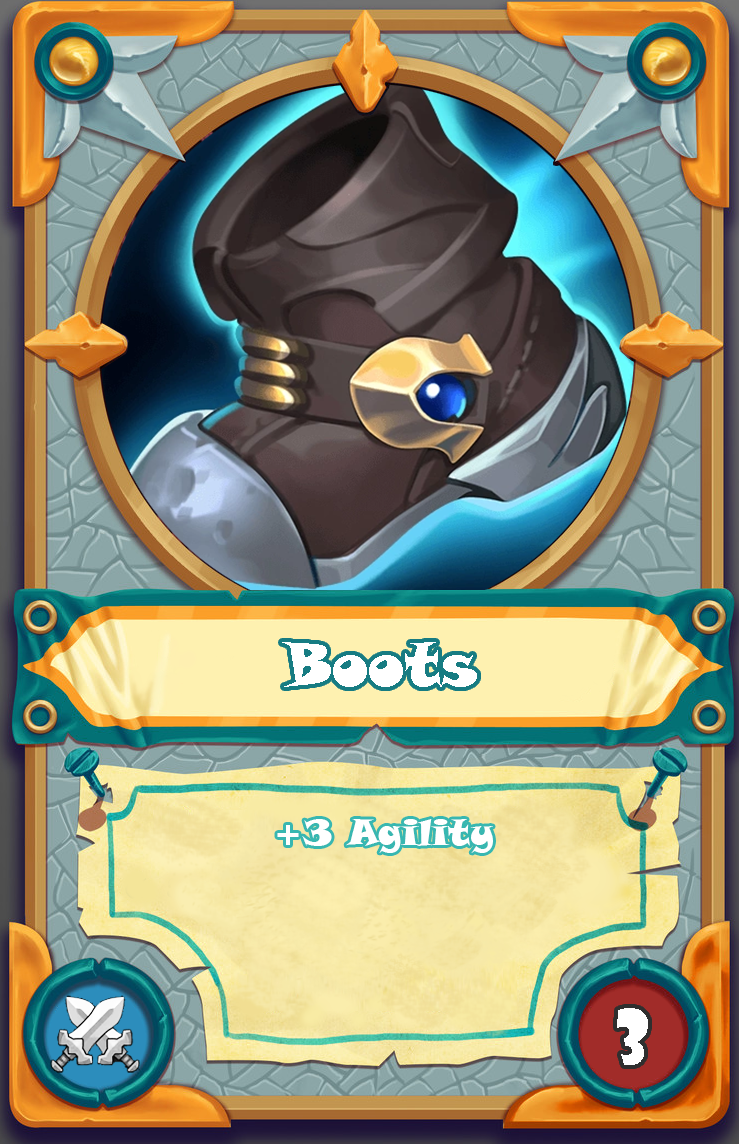
<style>
.page{position:relative;width:739px;height:1144px}
.page>*{position:absolute;margin:0}
.t1{font:60px "SnapITC-Regular";color:#ffffff}
.t2{font:36px "SnapITC-Regular";color:#ffffff}
.t3{font:72px "ShowcardGothic-Reg";color:#ffffff}
</style>
<div class="page">
<p class="t1" style="left:282px;top:642px;width:195px;height:45px">Boots</p>
<p class="t2" style="left:277px;top:819px;width:216px;height:34px">+3 Agility</p>
<p class="t3" style="left:617px;top:1008px;width:31px;height:57px">3</p>
</div>
